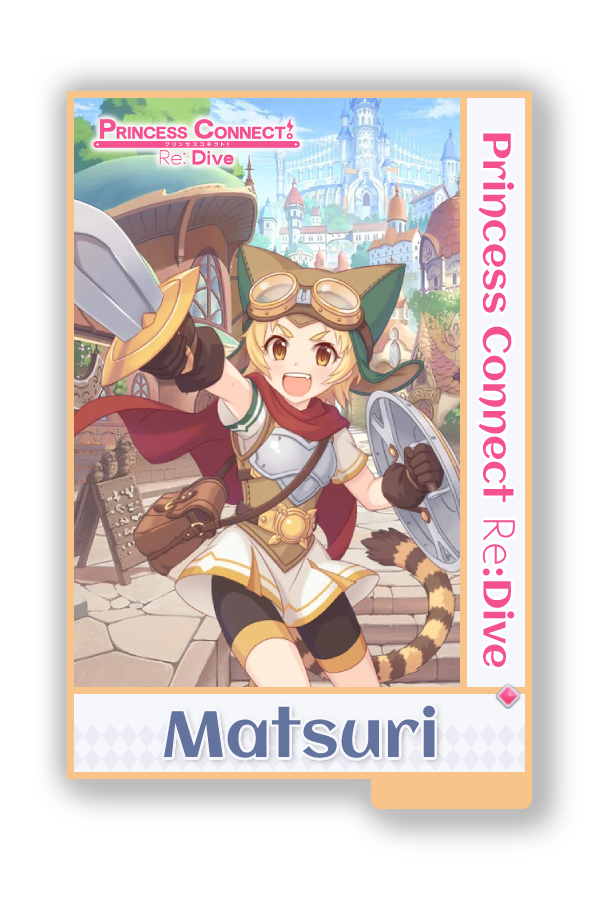
<style>
.page{position:relative;width:600px;height:900px;background:#ffffff}
.page>*{position:absolute;margin:0}
.t1{font:39px "Aclonica-Regular";color:#f55191}
.t2{font:39px "AaarghNormal";color:#f55191}
.t3{font:65px "Aclonica-Regular";color:#64739d}
</style>
<div class="page">
<p class="t1" style="left:478px;top:133px;width:38px;height:534px;rotate:90deg">Princess Connect <span class="t2">Re</span>:Dive</p>
<p class="t3" style="left:164px;top:705px;width:271px;height:53px">Matsuri</p>
</div>
